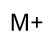
<style>
.page{position:relative;width:53px;height:41px;background:#ffffff}
.page>*{position:absolute;margin:0}
.t1{font:23.7px "DroidSans";color:#000000}
</style>
<div class="page">
<p class="t1" style="left:11px;top:13px;width:32px;height:18px">M+</p>
</div>
